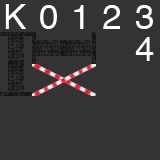
<style>
.page{position:relative;width:160px;height:160px;background:#333333}
.page>*{position:absolute;margin:0}
.t1{font:35px "Helvetica";color:#ffffff}
.t2{font:35px "Helvetica"}
</style>
<div class="page">
<p class="t1" style="left:5px;top:4px;width:148px;height:25px">K 0 1 2 3</p>
<p class="t2" style="left:5px;top:36px;width:149px;height:25px">K 0 1 2 4</p>
</div>
